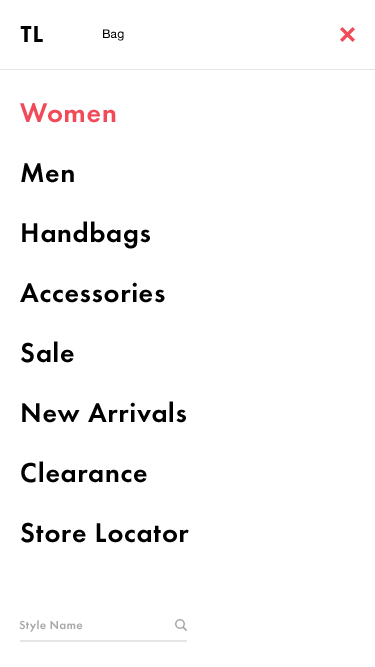
<style>
.page{position:relative;width:375px;height:667px;background:#ffffff}
.page>*{position:absolute;margin:0}
.t1{font:24px "FuturaPT-Heavy";letter-spacing:0.03em;color:#000000;text-transform:uppercase}
.t2{font:12px "HelveticaNeue";letter-spacing:0.03em;color:#000000}
.t3{font:28px/60px "FuturaPT-Demi";letter-spacing:0.03em;color:#000000}
.t4{font:28px/60px "FuturaPT-Demi";letter-spacing:0.03em;color:#f14a58}
.t5{font:12px "FuturaPT-Demi";letter-spacing:0.03em;color:#a8a8a8}
</style>
<div class="page">
<p class="t1" style="left:20px;top:26px;width:23px;height:16px">tl</p>
<p class="t2" style="left:103px;top:29px;width:21px;height:12px">Bag</p>
<p class="t3" style="left:20px;top:103px;width:169px;height:440px"><span class="t4">Women</span><br>Men<br>Handbags<br>Accessories<br>Sale<br>New Arrivals<br>Clearance<br>Store Locator</p>
<p class="t5" style="left:19px;top:620px;width:64px;height:12px">Style Name</p>
</div>
